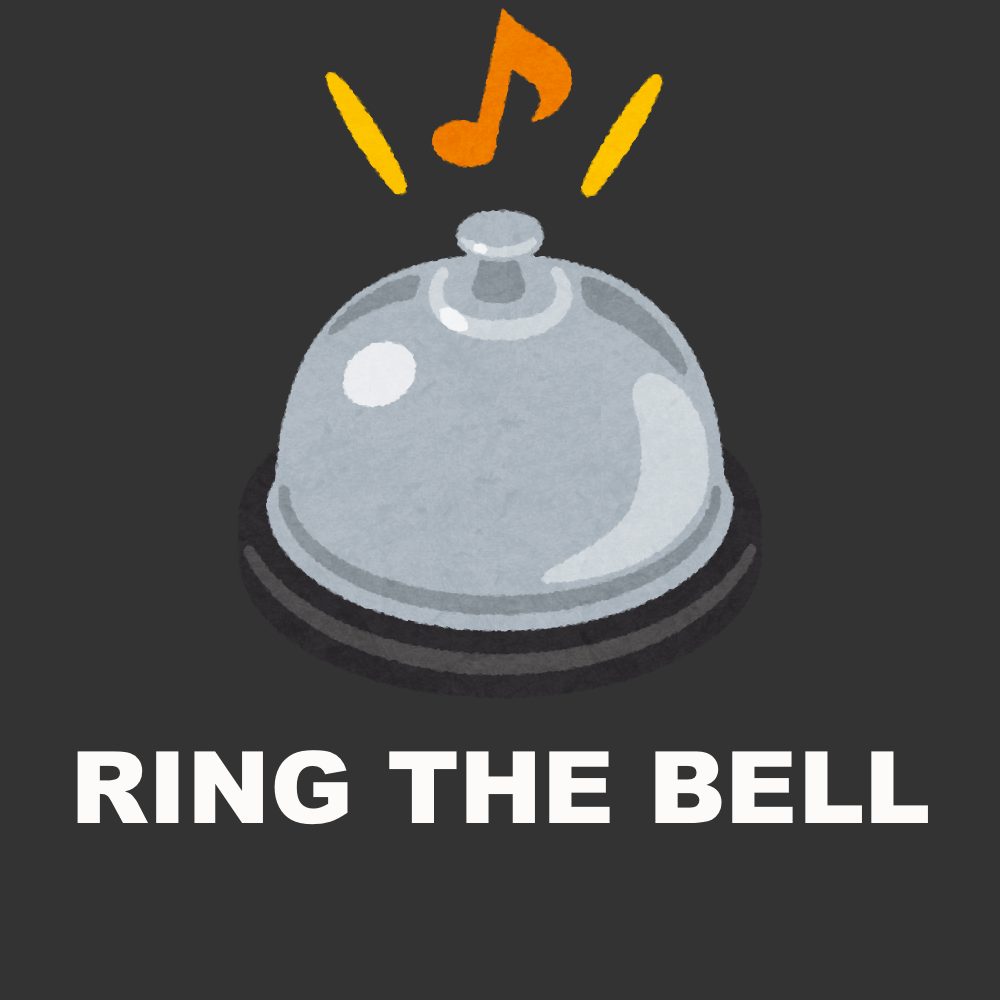
<style>
.page{position:relative;width:1000px;height:1000px;background:#333333}
.page>*{position:absolute;margin:0}
.t1{font:100px "Arial-Black";color:#fcfbfa}
</style>
<div class="page">
<p class="t1" style="left:77px;top:750px;width:851px;height:75px">RING THE BELL</p>
</div>
